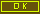
<style>
.page{position:relative;width:40px;height:14px;background:#67530b}
.page>*{position:absolute;margin:0}
.t1{font:10px "QuirkyRobot";color:#d9ff00}
</style>
<div class="page">
<p class="t1" style="left:14px;top:3px;width:13px;height:6px">O K</p>
</div>
